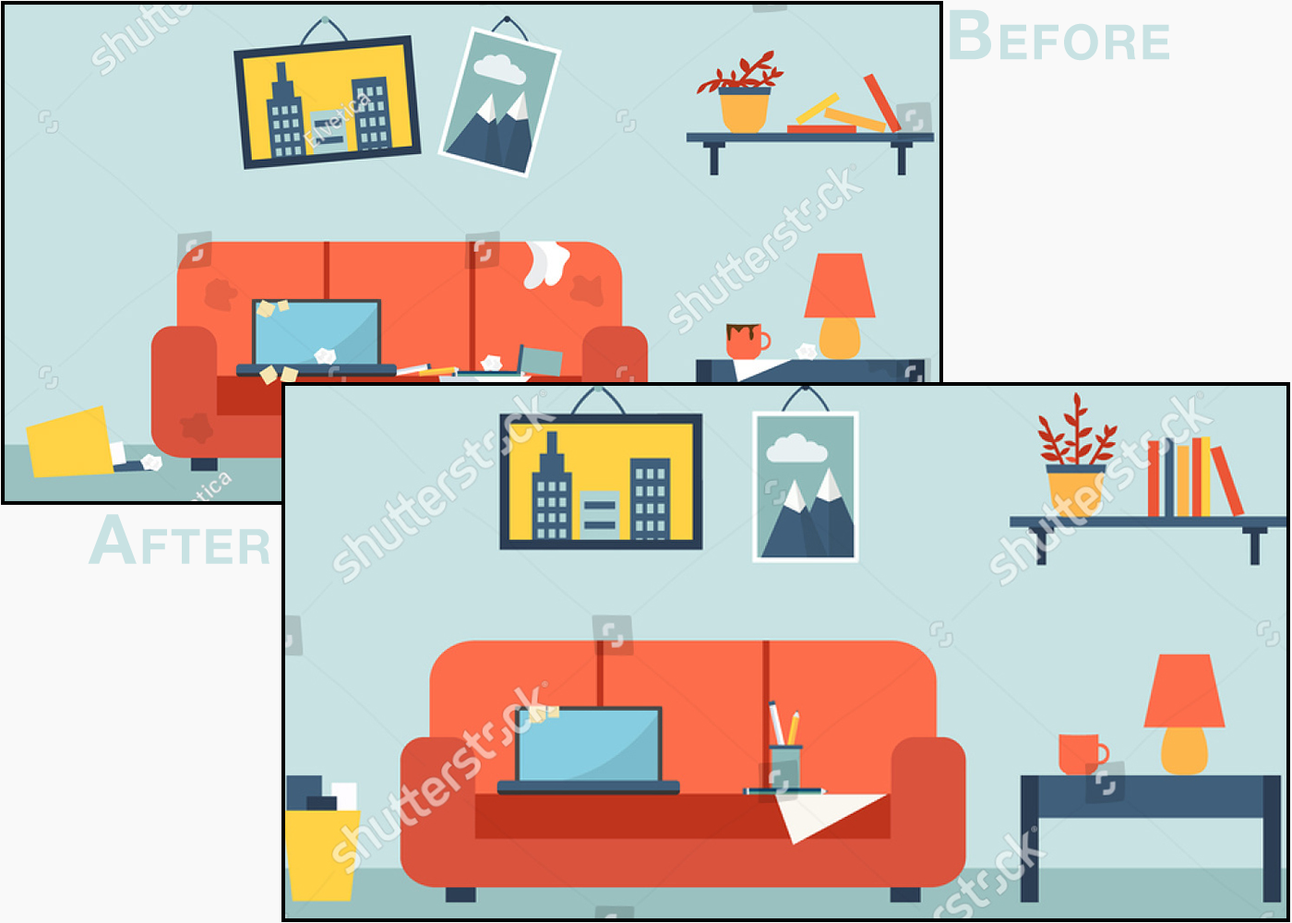
<style>
.page{position:relative;width:1292px;height:923px;background:#c8e2e3}
.page>*{position:absolute;margin:0}
.t1{font:69.2px "HelveticaNeue-Bold";letter-spacing:0.05em;color:#c8e2e3;font-variant:small-caps}
</style>
<div class="page">
<p class="t1" style="left:950px;top:9px;width:219px;height:52px">Before</p>
<p class="t1" style="left:88px;top:514px;width:182px;height:50px">After</p>
</div>
